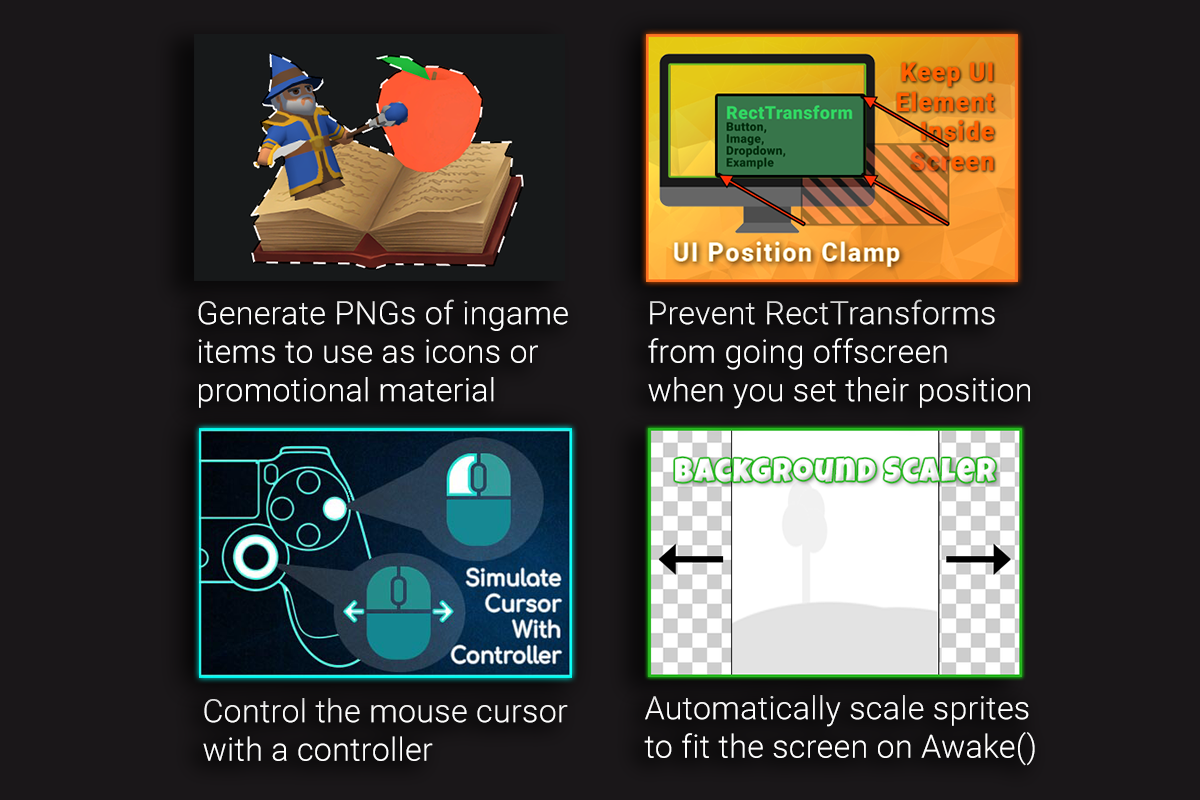
<style>
.page{position:relative;width:1200px;height:800px;background:#1a1719}
.page>*{position:absolute;margin:0}
.t1{font:32.2px "Roboto-Light";letter-spacing:0.01em;color:#ffffff}
</style>
<div class="page">
<p class="t1" style="left:198px;top:299px;width:370px;height:109px">Generate PNGs of ingame<br>items to use as icons or<br>promotional material</p>
<p class="t1" style="left:648px;top:299px;width:382px;height:110px">Prevent RectTransforms<br>from going offscreen<br>when you set their position</p>
<p class="t1" style="left:203px;top:698px;width:365px;height:63px">Control the mouse cursor<br>with a controller</p>
<p class="t1" style="left:644px;top:695px;width:391px;height:71px">Automatically scale sprites<br>to fit the screen on Awake()</p>
</div>
